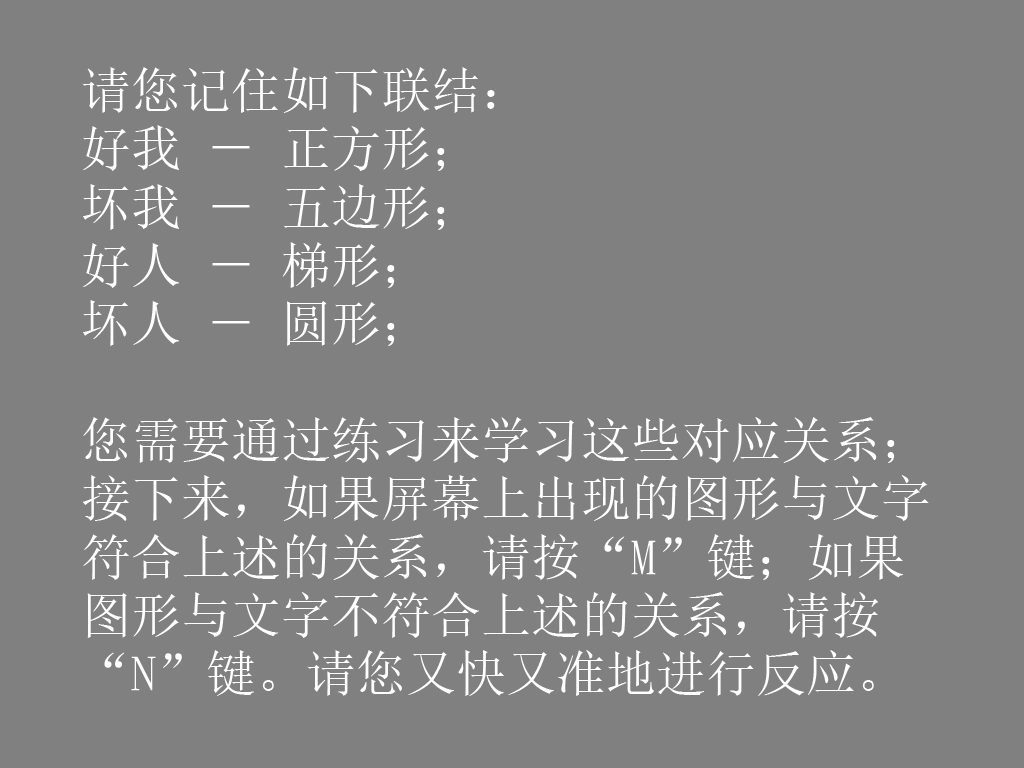
<style>
.page{position:relative;width:1024px;height:768px;background:#808080}
.page>*{position:absolute;margin:0}
.t1{font:50px/58.3px "SimSun";color:#ffffff}
</style>
<div class="page">
<p class="t1" style="left:82px;top:67px;width:847px;height:629px">请您记住如下联结： <br>好我 － 正方形；<br>坏我 － 五边形；<br>好人 － 梯形；<br>坏人 － 圆形；<br><br>您需要通过练习来学习这些对应关系；<br>接下来，如果屏幕上出现的图形与文字<br>符合上述的关系，请按“M”键；如果<br>图形与文字不符合上述的关系，请按<br>“N”键。请您又快又准地进行反应。</p>
</div>
